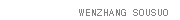
<style>
.page{position:relative;width:180px;height:20px;background:#ffffff}
.page>*{position:absolute;margin:0}
.t1{font:11px "SimHei";color:#828282}
</style>
<div class="page">
<p class="t1" style="left:79px;top:9px;width:89px;height:7px">WENZHANG SOUSUO</p>
</div>
